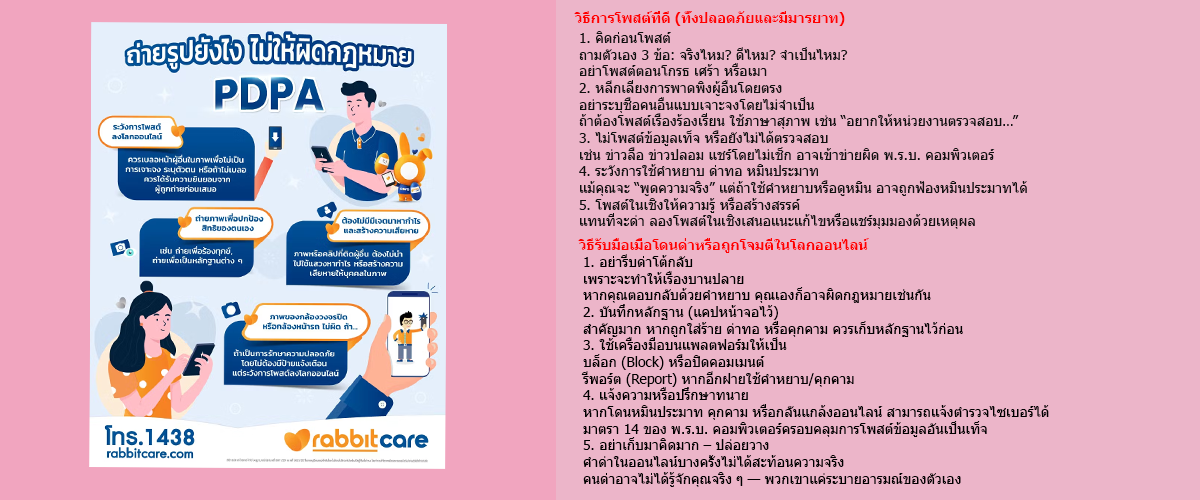
<style>
.page{position:relative;width:1200px;height:500px;background:#ecb5c9}
.page>*{position:absolute;margin:0}
.t1{font:13.9px "Tahoma-Bold";color:#ff0000}
.t2{font:13.9px "Tahoma";color:#101010}
.t3{font:13.9px "Tahoma";color:#000000}
</style>
<div class="page">
<p class="t1" style="left:574px;top:11px;width:271px;height:15px">วิธีการโพสต์ที่ดี (ทั้งปลอดภัยและมีมารยาท)</p>
<p class="t2" style="left:579px;top:31px;width:448px;height:198px">1. คิดก่อนโพสต์<br>ถามตัวเอง 3 ข้อ: จริงไหม? ดีไหม? จำเป็นไหม?<br>อย่าโพสต์ตอนโกรธ เศร้า หรือเมา<br>2. หลีกเลี่ยงการพาดพิงผู้อื่นโดยตรง<br>อย่าระบุชื่อคนอื่นแบบเจาะจงโดยไม่จำเป็น<br>ถ้าต้องโพสต์เรื่องร้องเรียน ใช้ภาษาสุภาพ เช่น “อยากให้หน่วยงานตรวจสอบ…”<br>3. ไม่โพสต์ข้อมูลเท็จ หรือยังไม่ได้ตรวจสอบ<br>เช่น ข่าวลือ ข่าวปลอม แชร์โดยไม่เช็ก อาจเข้าข่ายผิด พ.ร.บ. คอมพิวเตอร์<br>4. ระวังการใช้คำหยาบ ด่าทอ หมิ่นประมาท<br>แม้คุณจะ “พูดความจริง” แต่ถ้าใช้คำหยาบหรือดูหมิ่น อาจถูกฟ้องหมิ่นประมาทได้<br>5. โพสต์ในเชิงให้ความรู้ หรือสร้างสรรค์<br>แทนที่จะด่า ลองโพสต์ในเชิงเสนอแนะแก้ไขหรือแชร์มุมมองด้วยเหตุผล</p>
<p class="t1" style="left:578px;top:238px;width:291px;height:15px">วิธีรับมือเมื่อโดนด่าหรือถูกโจมตีในโลกออนไลน์</p>
<p class="t3" style="left:581px;top:254px;width:468px;height:233px">1. อย่ารีบด่าโต้กลับ<br>เพราะจะทำให้เรื่องบานปลาย<br>หากคุณตอบกลับด้วยคำหยาบ คุณเองก็อาจผิดกฎหมายเช่นกัน<br>2. บันทึกหลักฐาน (แคปหน้าจอไว้)<br>สำคัญมาก หากถูกใส่ร้าย ด่าทอ หรือคุกคาม ควรเก็บหลักฐานไว้ก่อน<br>3. ใช้เครื่องมือบนแพลตฟอร์มให้เป็น<br>บล็อก (Block) หรือปิดคอมเมนต์<br>รีพอร์ต (Report) หากอีกฝ่ายใช้คำหยาบ/คุกคาม<br>4. แจ้งความหรือปรึกษาทนาย<br>หากโดนหมิ่นประมาท คุกคาม หรือกลั่นแกล้งออนไลน์ สามารถแจ้งตำรวจไซเบอร์ได้<br>มาตรา 14 ของ พ.ร.บ. คอมพิวเตอร์ครอบคลุมการโพสต์ข้อมูลอันเป็นเท็จ<br>5. อย่าเก็บมาคิดมาก – ปล่อยวาง<br>คำด่าในออนไลน์บางครั้งไม่ได้สะท้อนความจริง<br>คนด่าอาจไม่ได้รู้จักคุณจริง ๆ — พวกเขาแค่ระบายอารมณ์ของตัวเอง</p>
</div>
